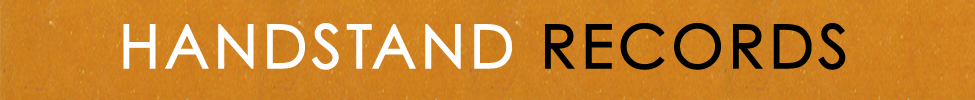
<style>
.page{position:relative;width:975px;height:100px}
.page>*{position:absolute;margin:0}
.t1{font:60px "CenturyGothic";letter-spacing:0.05em;color:#fefefe;text-transform:uppercase;font-weight:bold}
.t2{font:60px "CenturyGothic";letter-spacing:0.05em;color:#000000;text-transform:uppercase;font-weight:bold}
</style>
<div class="page">
<p class="t1" style="left:123px;top:23px;width:723px;height:47px">HandstanD <span class="t2">Records</span></p>
</div>
